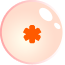
<style>
.page{position:relative;width:65px;height:65px;background:#ffffff}
.page>*{position:absolute;margin:0}
.t1{font:86px "Opificio";color:#ff5a00;font-weight:bold}
</style>
<div class="page">
<p class="t1" style="left:23px;top:25px;width:19px;height:19px">*</p>
</div>
